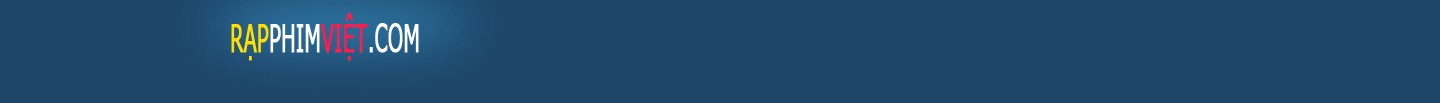
<style>
.page{position:relative;width:1440px;height:103px;background:#1e466a}
.page>*{position:absolute;margin:0}
.t1{font:39px "Tahoma";color:#ffffff;text-transform:uppercase;font-weight:bold;scale:0.54 1}
.t2{font:39px "Tahoma";color:#ffde00;text-transform:uppercase;font-weight:bold;scale:0.54 1}
.t3{font:39px "Tahoma";color:#ff1b4b;text-transform:uppercase;font-weight:bold;scale:0.54 1}
</style>
<div class="page">
<p class="t1" style="left:231px;top:13px;width:188px;height:48px"><span class="t2">rạP</span>pHIM<span class="t3">vIệT</span>.COM</p>
</div>
